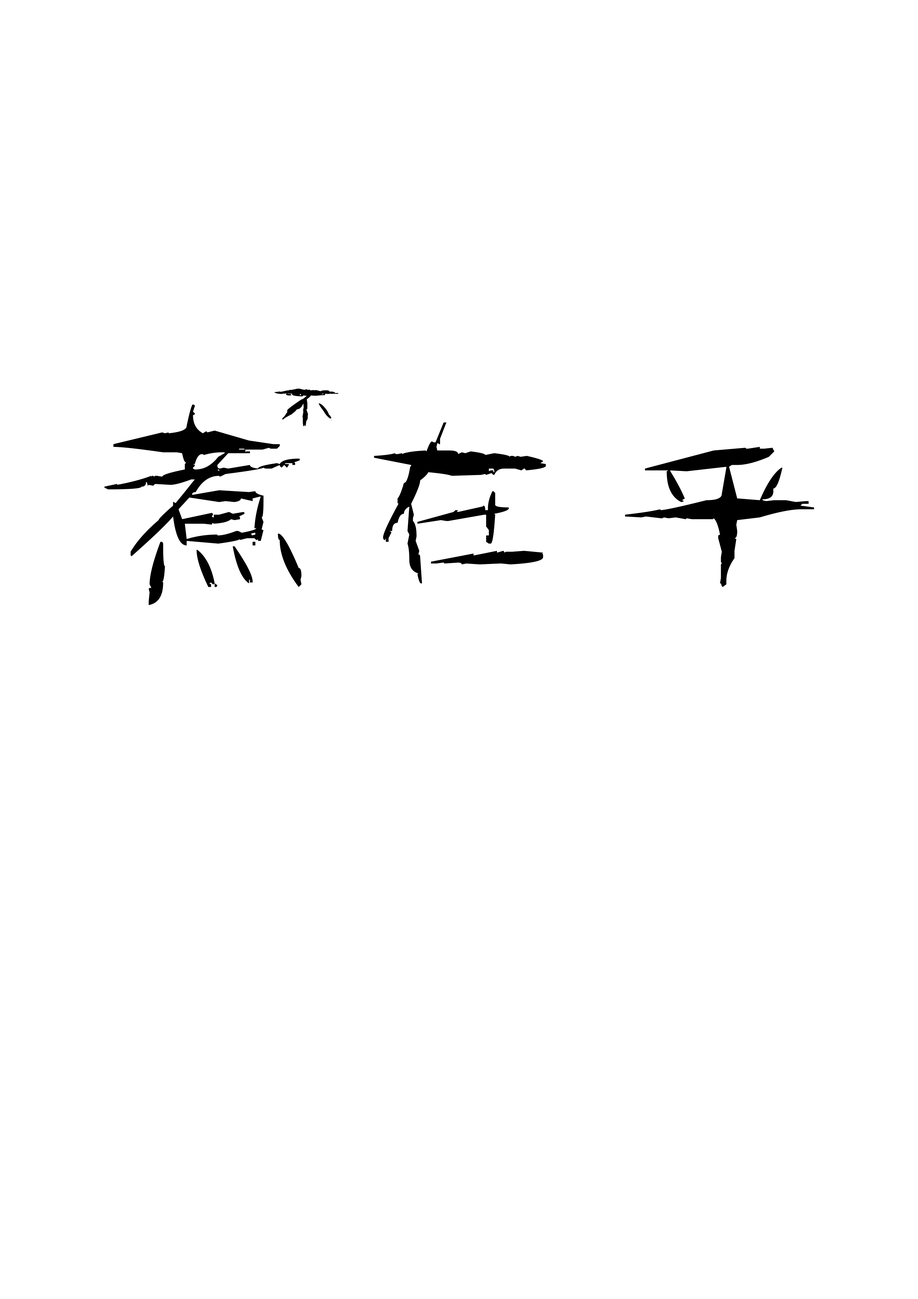
<style>
.page{position:relative;width:918px;height:1299px;background:#ffffff}
.page>*{position:absolute;margin:0}
.t1{font:77.1px "--";letter-spacing:0.1em;color:#000000}
.t2{font:231.4px "--";letter-spacing:0.1em;color:#000000}
</style>
<div class="page">
<p class="t1" style="left:274px;top:388px;width:64px;height:38px">不</p>
<p class="t2" style="left:104px;top:404px;width:710px;height:201px">煮在乎</p>
</div>
